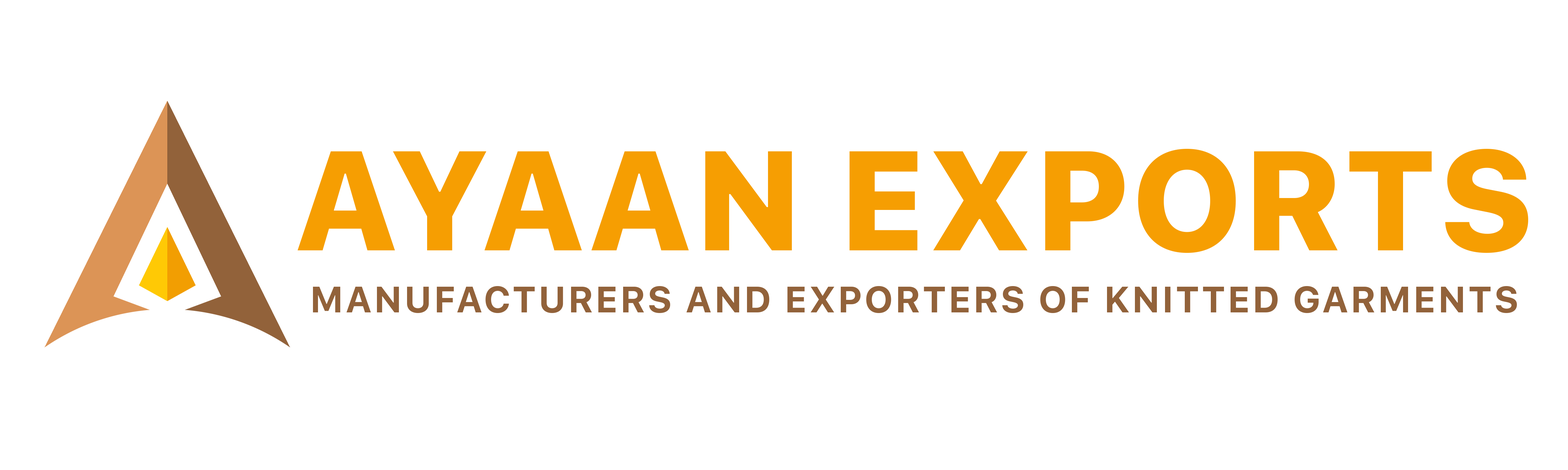
<style>
.page{position:relative;width:1568px;height:470px;background:#ffffff}
.page>*{position:absolute;margin:0}
.t1{font:140.5px "SFUIText-Heavy";color:#f69e02}
.t2{font:36.7px "SFUIText-Bold";letter-spacing:0.05em;color:#92623a}
</style>
<div class="page">
<p class="t1" style="left:298px;top:149px;width:1230px;height:104px">AYAAN EXPORTS</p>
<p class="t2" style="left:313px;top:286px;width:1204px;height:28px">MANUFACTURERS AND EXPORTERS OF KNITTED GARMENTS</p>
</div>
